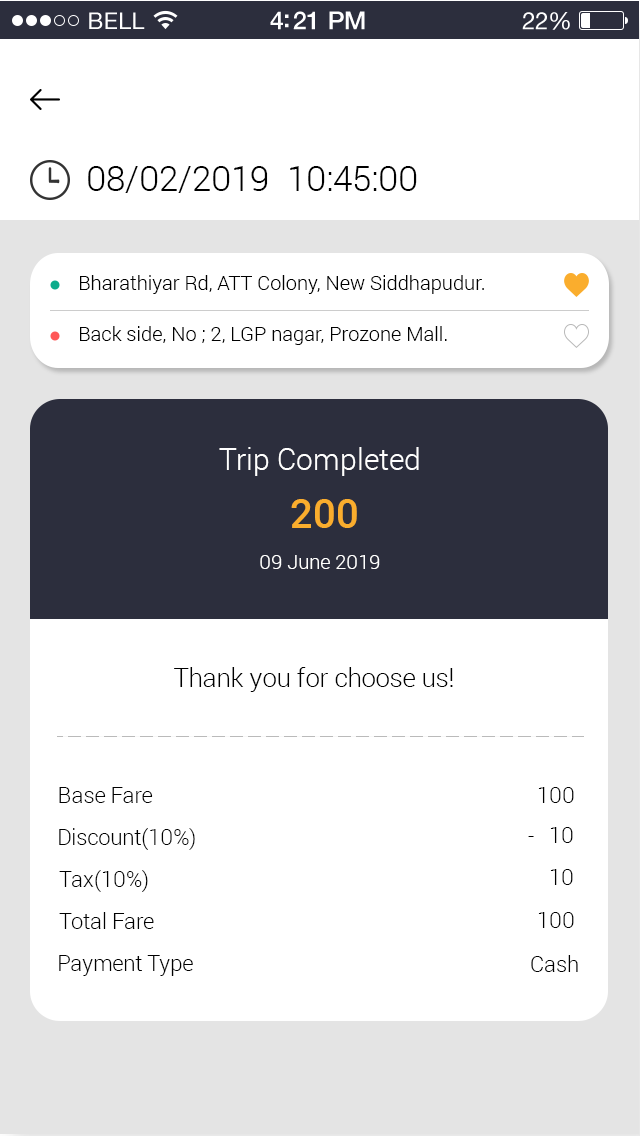
<style>
.page{position:relative;width:640px;height:1136px;background:#ffffff}
.page>*{position:absolute;margin:0}
.t1{font:35px "Roboto-Light";color:#000000}
.t2{font:20px "Roboto-Light";color:#000000}
.t3{font:20px "Roboto-Light";color:#010101}
.t4{font:30px "Roboto-Light";color:#ffffff}
.t5{font:40px "Roboto-Medium";color:#faad2d}
.t6{font:20px "Roboto-Light";color:#ffffff}
.t7{font:26px "Roboto-Light";color:#000000}
.t8{font:22px "Roboto-Light";color:#000000}
</style>
<div class="page">
<p class="t1" style="left:88px;top:166px;width:329px;height:27px">08/02/2019  10:45:00</p>
<p class="t2" style="left:80px;top:275px;width:404px;height:19px">Bharathiyar Rd, ATT Colony, New Siddhapudur.</p>
<p class="t3" style="left:80px;top:326px;width:367px;height:19px">Back side, No ; 2, LGP nagar, Prozone Mall.</p>
<p class="t4" style="left:219px;top:447px;width:200px;height:29px">Trip Completed</p>
<p class="t5" style="left:291px;top:499px;width:66px;height:29px">₹ 200</p>
<p class="t6" style="left:260px;top:555px;width:120px;height:14px">09 June 2019</p>
<p class="t7" style="left:174px;top:667px;width:279px;height:25px">Thank you for choose us!</p>
<p class="t8" style="left:59px;top:787px;width:94px;height:16px">Base Fare</p>
<p class="t8" style="left:538px;top:787px;width:36px;height:16px">₹ 100</p>
<p class="t8" style="left:59px;top:828px;width:136px;height:22px">Discount(10%)</p>
<p class="t8" style="left:528px;top:827px;width:45px;height:16px">- ₹ 10</p>
<p class="t8" style="left:59px;top:870px;width:89px;height:22px">Tax(10%)</p>
<p class="t8" style="left:550px;top:869px;width:23px;height:16px">₹ 10</p>
<p class="t8" style="left:59px;top:912px;width:95px;height:17px">Total Fare</p>
<p class="t8" style="left:538px;top:912px;width:36px;height:16px">₹ 100</p>
<p class="t8" style="left:59px;top:955px;width:134px;height:21px">Payment Type</p>
<p class="t8" style="left:531px;top:955px;width:47px;height:17px">Cash</p>
</div>
